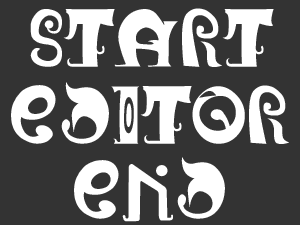
<style>
.page{position:relative;width:300px;height:225px;background:#333333}
.page>*{position:absolute;margin:0}
.t1{font:80px "MadokaLetters";color:#ffffff}
</style>
<div class="page">
<p class="t1" style="left:30px;top:8px;width:244px;height:59px">START</p>
<p class="t1" style="left:11px;top:82px;width:278px;height:62px">EDITOR</p>
<p class="t1" style="left:74px;top:157px;width:151px;height:65px">END</p>
</div>
